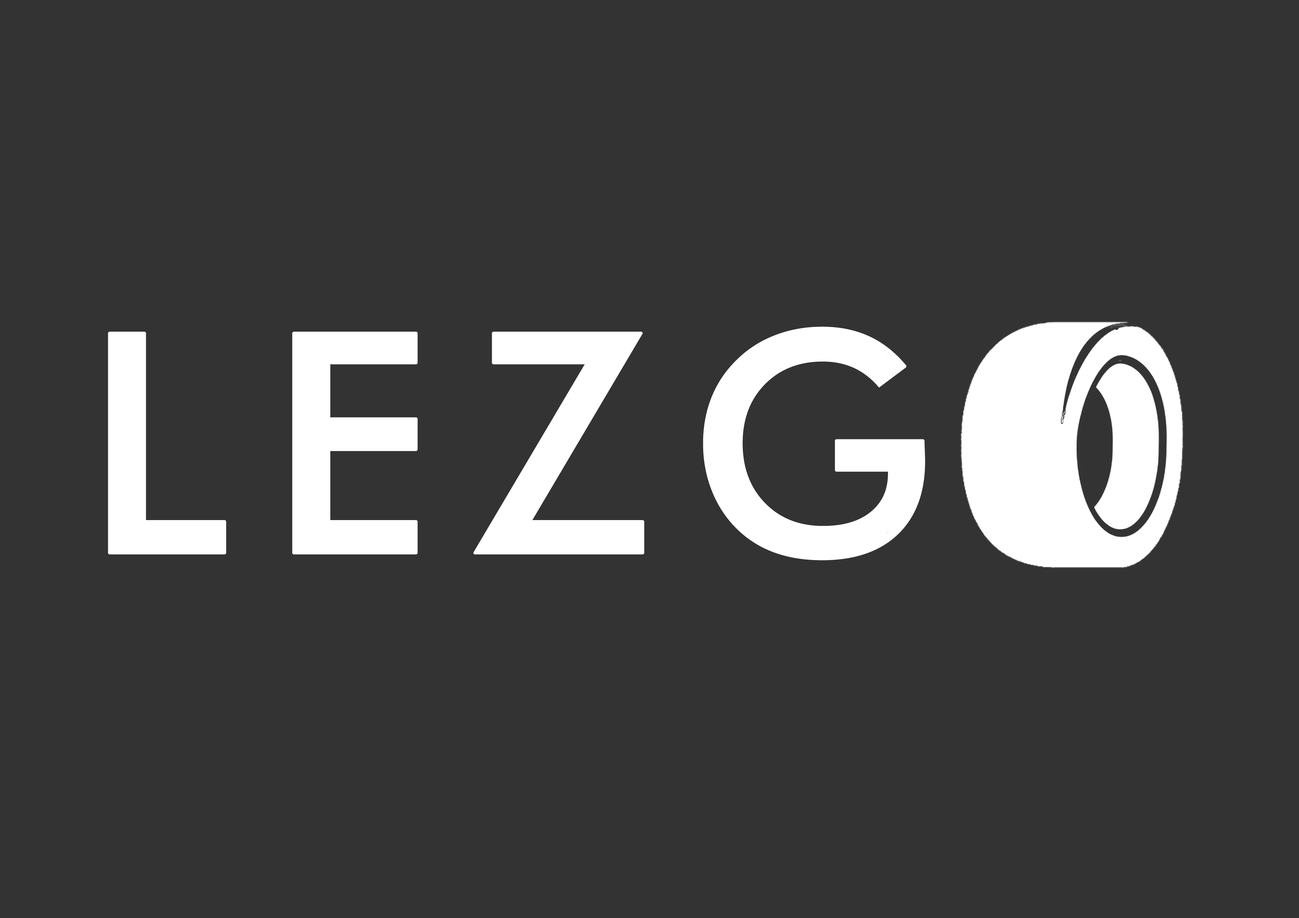
<style>
.page{position:relative;width:1299px;height:918px;background:#333333}
.page>*{position:absolute;margin:0}
.t1{font:308.5px "FuturaBT-Medium";letter-spacing:0.1em;color:#ffffff;font-weight:bold}
</style>
<div class="page">
<p class="t1" style="left:108px;top:327px;width:817px;height:234px">LEZG</p>
</div>
